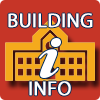
<style>
.page{position:relative;width:100px;height:100px;background:#c63527}
.page>*{position:absolute;margin:0}
.t1{font:20px "MyriadPro-Regular";color:#ffffff;text-transform:uppercase;font-weight:bold}
</style>
<div class="page">
<p class="t1" style="left:8px;top:13px;width:85px;height:15px">building</p>
<p class="t1" style="left:29px;top:81px;width:42px;height:15px">info</p>
</div>
